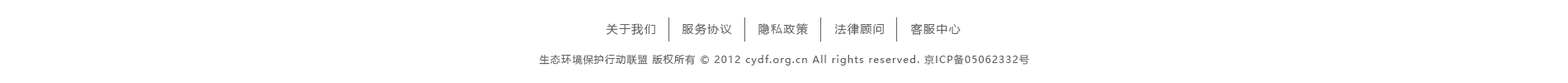
<style>
.page{position:relative;width:1568px;height:83px;background:#ffffff}
.page>*{position:absolute;margin:0}
.t1{font:11.6px "MicrosoftYaHei";letter-spacing:0.1em;color:#606060}
.t2{font:9.9px "MicrosoftYaHei";letter-spacing:0.1em;color:#606060}
</style>
<div class="page">
<p class="t1" style="left:607px;top:23px;width:48px;height:12px">关于我们</p>
<p class="t1" style="left:682px;top:23px;width:50px;height:12px">服务协议</p>
<p class="t1" style="left:758px;top:23px;width:50px;height:12px">隐私政策</p>
<p class="t1" style="left:834px;top:23px;width:50px;height:12px">法律顾问</p>
<p class="t1" style="left:910px;top:23px;width:51px;height:12px">客服中心</p>
<p class="t2" style="left:539px;top:54px;width:490px;height:11px">生态环境保护行动联盟 版权所有 © 2012 cydf.org.cn All rights reserved. 京ICP备05062332号</p>
</div>
